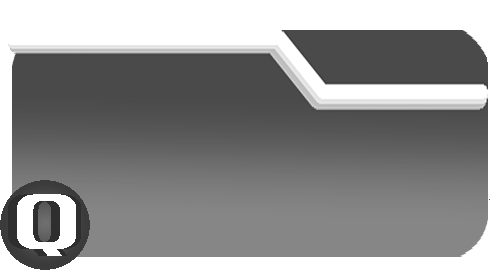
<style>
.page{position:relative;width:500px;height:270px;background:#ffffff}
.page>*{position:absolute;margin:0}
.t1{font:67.4px "Unispace-Bold";color:#ffffff;scale:1.67 1}
</style>
<div class="page">
<p class="t1" style="left:17px;top:194px;width:59px;height:62px">Q</p>
<p class="t1" style="left:22px;top:194px;width:59px;height:62px">Q</p>
</div>
